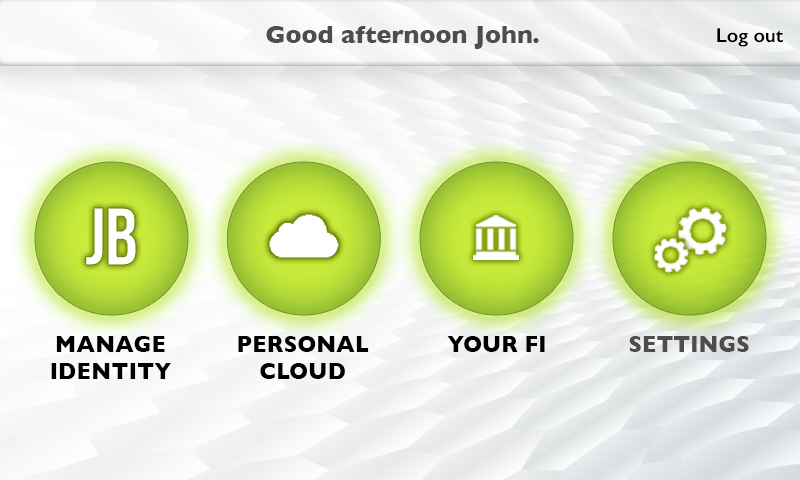
<style>
.page{position:relative;width:800px;height:480px}
.page>*{position:absolute;margin:0}
.t1{font:25px "GillSans-Bold";color:#4d4d4d}
.t2{font:20px "GillSans-SemiBold";color:#000000}
.t3{font:81.5px "BebasNeue";letter-spacing:-0.01em;color:#ffffff;text-transform:uppercase}
.t4{font:22.5px/27px "GillSans-Bold";color:#000000;text-transform:uppercase}
.t5{font:22.5px "GillSans-Bold";letter-spacing:-0.01em;color:#000000;text-transform:uppercase}
.t6{font:22.5px "GillSans-Bold";letter-spacing:-0.01em;color:#4d4d4d;text-transform:uppercase}
</style>
<div class="page">
<p class="t1" style="left:266px;top:26px;width:273px;height:23px">Good afternoon John.</p>
<p class="t2" style="left:717px;top:28px;width:66px;height:19px">Log out</p>
<p class="t3" style="left:85px;top:208px;width:51px;height:57px">JB</p>
<p class="t4" style="left:51px;top:336px;width:120px;height:43px;text-align:center">Manage<br>Identity</p>
<p class="t4" style="left:238px;top:336px;width:131px;height:43px;text-align:center">Personal<br>Cloud</p>
<p class="t5" style="left:447px;top:336px;width:98px;height:16px">Your FI</p>
<p class="t6" style="left:629px;top:336px;width:120px;height:16px">Settings</p>
</div>
